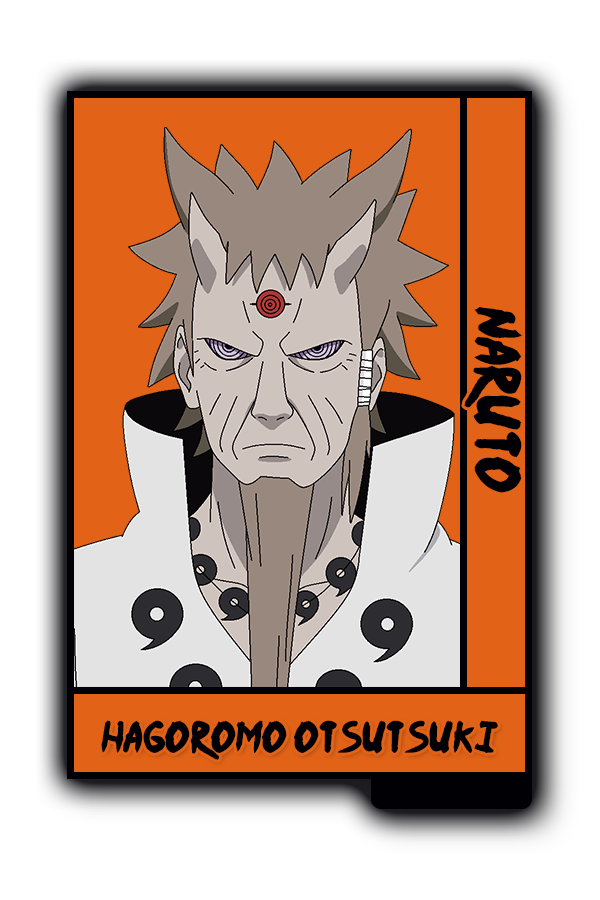
<style>
.page{position:relative;width:600px;height:900px;background:#e26317}
.page>*{position:absolute;margin:0}
.t1{font:52px "Ninja-Naruto";color:#010005}
.t2{font:35.7px "Ninja-Naruto";color:#010005}
</style>
<div class="page">
<p class="t1" style="left:464px;top:307px;width:59px;height:186px;rotate:90deg">Naruto</p>
<p class="t2" style="left:101px;top:720px;width:397px;height:40px">Hagoromo Otsutsuki</p>
</div>
